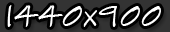
<style>
.page{position:relative;width:170px;height:32px;background:#333333}
.page>*{position:absolute;margin:0}
.t1{font:33.3px "SketchFlowPrint";color:#ffffff}
</style>
<div class="page">
<p class="t1" style="left:7px;top:5px;width:154px;height:22px">1440x900</p>
</div>
